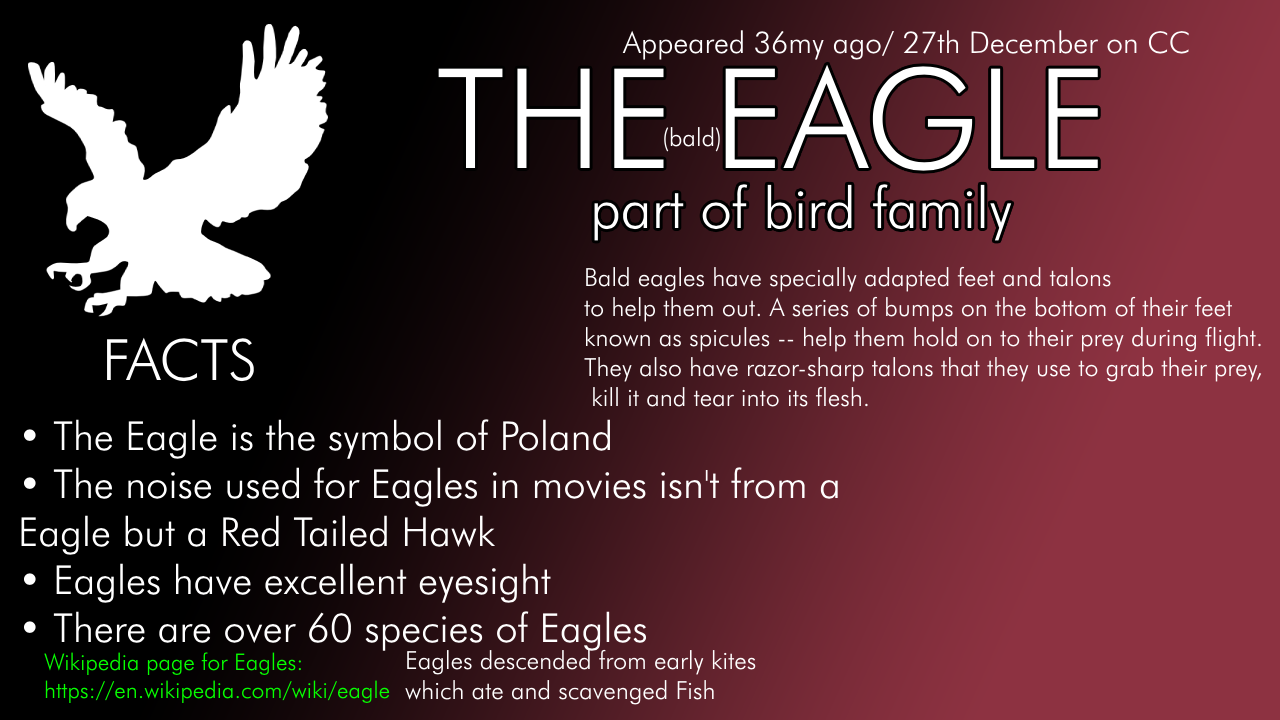
<style>
.page{position:relative;width:1280px;height:720px}
.page>*{position:absolute;margin:0}
.t1{font:30px "FuturaBT-Light";color:#ffffff}
.t2{font:139px "FuturaBT-Light";color:#ffffff}
.t3{font:25px "FuturaBT-Light";color:#ffffff}
.t4{font:57px "FuturaBT-Light";color:#ffffff}
.t5{font:40px "FuturaBT-Light";color:#ffffff}
.t6{font:23px "FuturaBT-Light";color:#06ff00}
</style>
<div class="page">
<p class="t1" style="left:622px;top:30px;width:567px;height:30px">Appeared 36my ago/ 27th December on CC</p>
<p class="t2" style="left:438px;top:64px;width:660px;height:107px">THE EAGLE</p>
<p class="t3" style="left:664px;top:127px;width:56px;height:25px">(bald)</p>
<p class="t4" style="left:594px;top:184px;width:418px;height:57px">part of bird family</p>
<p class="t3" style="left:584px;top:266px;width:678px;height:141px">Bald eagles have specially adapted feet and talons <br>to help them out. A series of bumps on the bottom of their feet <br>known as spicules -- help them hold on to their prey during flight. <br>They also have razor-sharp talons that they use to grab their prey,<br> kill it and tear into its flesh.</p>
<p class="t4" style="left:107px;top:337px;width:147px;height:45px">FACTS</p>
<p class="t5" style="left:21px;top:419px;width:817px;height:232px">• The Eagle is the symbol of Poland<br>• The noise used for Eagles in movies isn't from a <br>Eagle but a Red Tailed Hawk<br>• Eagles have excellent eyesight<br>• There are over 60 species of Eagles</p>
<p class="t6" style="left:44px;top:652px;width:346px;height:52px">Wikipedia page for Eagles:<br>https://en.wikipedia.com/wiki/eagle</p>
<p class="t3" style="left:405px;top:649px;width:351px;height:56px">Eagles descended from early kites <br>which ate and scavenged Fish</p>
</div>
